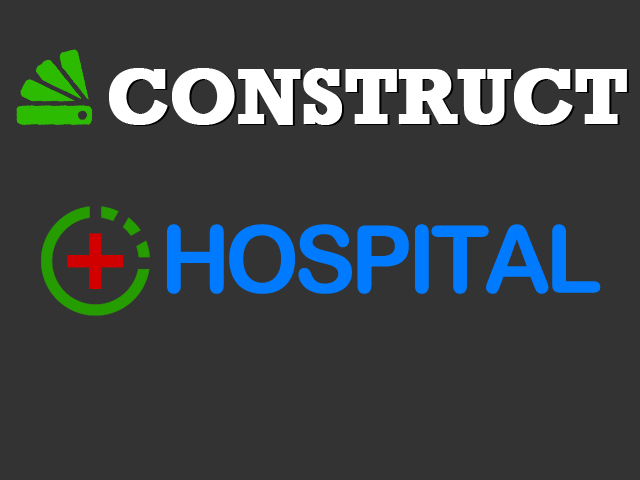
<style>
.page{position:relative;width:640px;height:480px;background:#333333}
.page>*{position:absolute;margin:0}
.t1{font:80px "Rockwell-Bold";letter-spacing:-0.02em;color:#ffffff;font-weight:bold}
.t2{font:93.5px "ArialRoundedMTBold";letter-spacing:-0.06em;color:#007bff}
</style>
<div class="page">
<p class="t1" style="left:109px;top:68px;width:518px;height:57px">CONSTRUCT</p>
<p class="t2" style="left:167px;top:224px;width:434px;height:70px">HOSPITAL</p>
</div>
